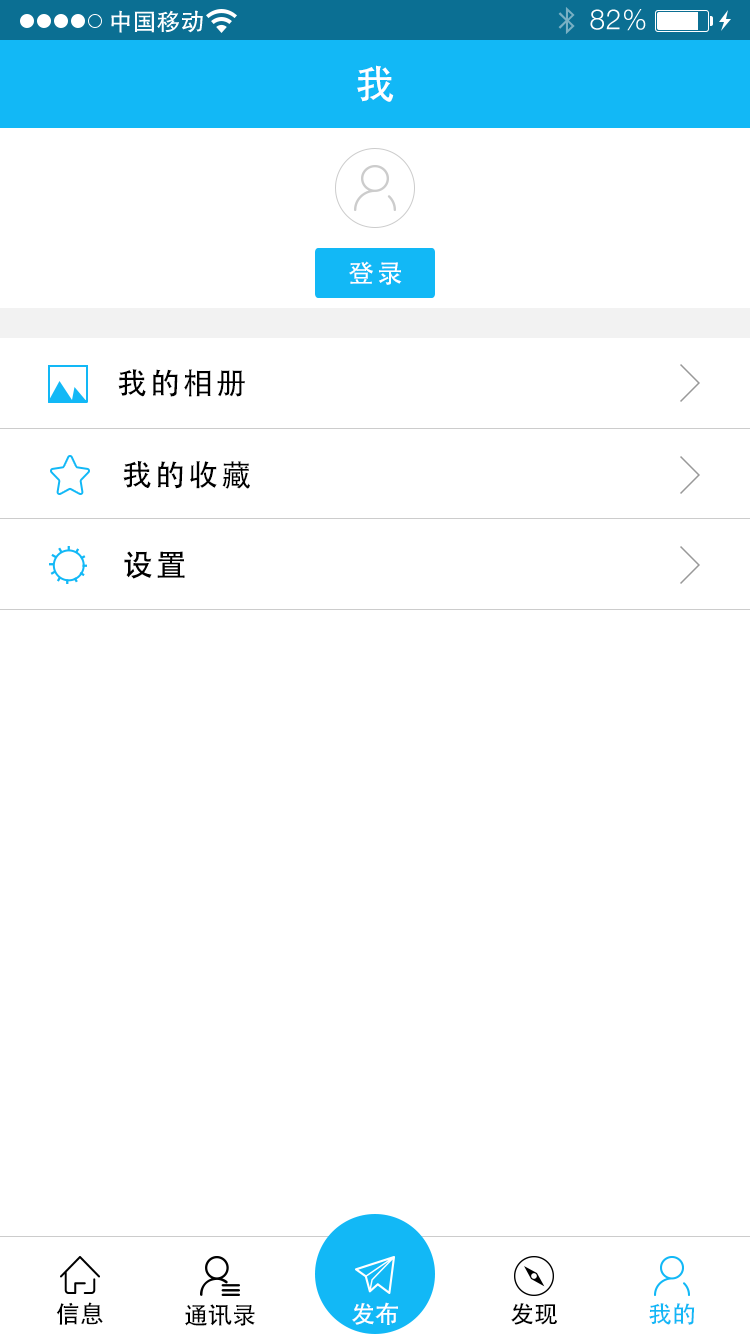
<style>
.page{position:relative;width:750px;height:1334px;background:#ffffff}
.page>*{position:absolute;margin:0}
.t1{font:40px "AdobeHeitiStd-Regular";color:#ffffff}
.t2{font:26px "AdobeHeitiStd-Regular";letter-spacing:0.104em;color:#ffffff}
.t3{font:30px "AdobeHeitiStd-Regular";letter-spacing:0.104em;color:#000000}
.t4{font:24px "AdobeHeitiStd-Regular";color:#000000}
.t5{font:24px "AdobeHeitiStd-Regular";color:#ffffff}
.t6{font:24px "AdobeHeitiStd-Regular";color:#12b8f6}
</style>
<div class="page">
<p class="t1" style="left:357px;top:65px;width:37px;height:37px">我</p>
<p class="t2" style="left:349px;top:261px;width:53px;height:24px">登录</p>
<p class="t3" style="left:118px;top:369px;width:127px;height:28px">我的相册</p>
<p class="t3" style="left:123px;top:460px;width:127px;height:29px">我的收藏</p>
<p class="t3" style="left:124px;top:551px;width:61px;height:28px">设置</p>
<p class="t4" style="left:56px;top:1302px;width:47px;height:23px">信息</p>
<p class="t5" style="left:352px;top:1302px;width:46px;height:23px">发布</p>
<p class="t4" style="left:185px;top:1304px;width:70px;height:22px">通讯录</p>
<p class="t4" style="left:511px;top:1303px;width:47px;height:22px">发现</p>
<p class="t6" style="left:649px;top:1303px;width:46px;height:22px">我的</p>
</div>
